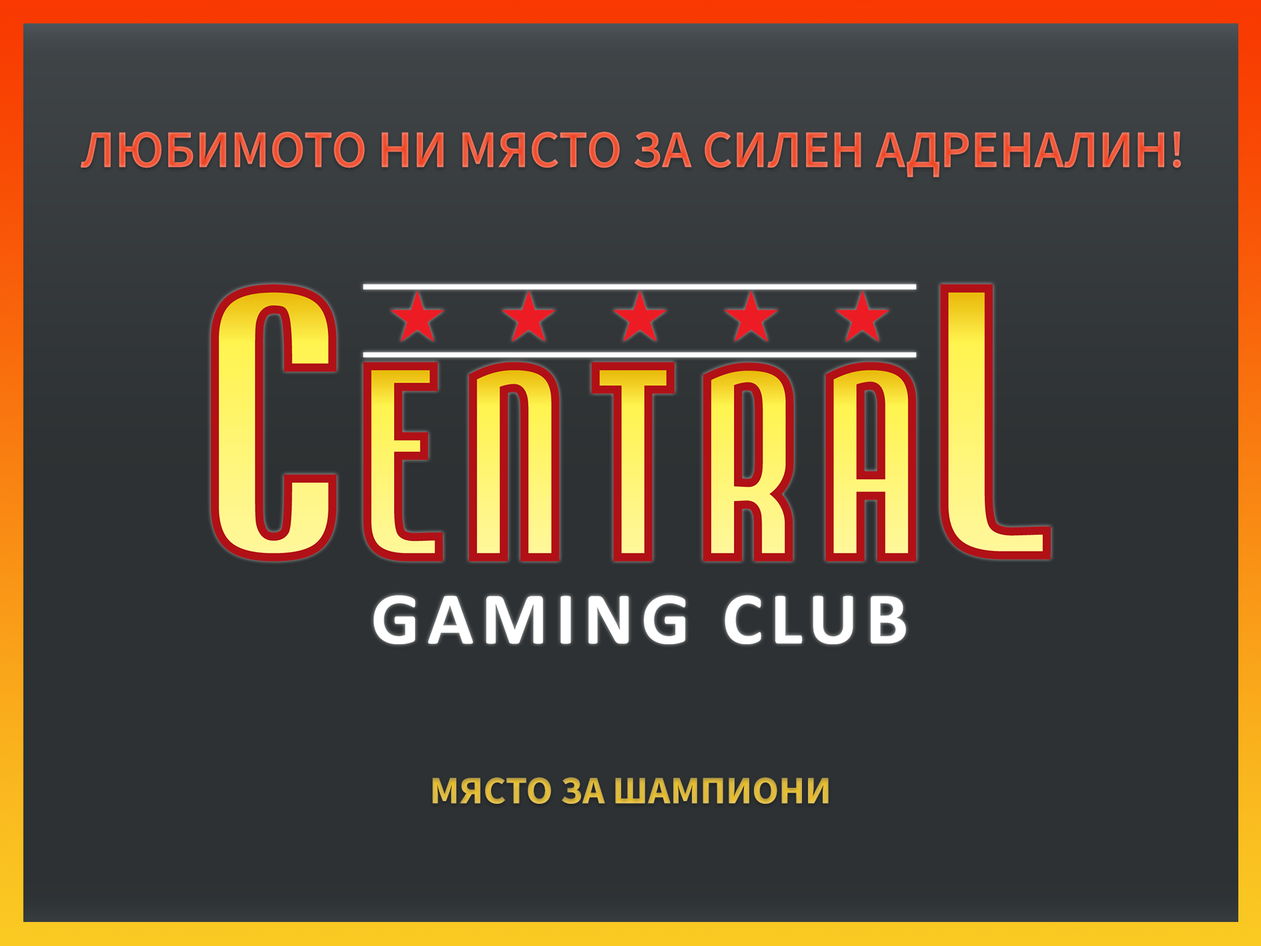
<style>
.page{position:relative;width:1261px;height:946px;background:#2d3133}
.page>*{position:absolute;margin:0}
.t1{font:52.8px "SourceSansRoman-Semibold";color:#f05e41}
.t2{font:38.9px "SourceSansRoman-Bold";color:#dbb940}
</style>
<div class="page">
<p class="t1" style="left:80px;top:131px;width:1101px;height:46px">ЛЮБИМОТО НИ МЯСТО ЗА СИЛЕН АДРЕНАЛИН!</p>
<p class="t2" style="left:432px;top:777px;width:397px;height:26px">МЯСТО ЗА ШАМПИОНИ</p>
</div>
